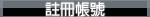
<style>
.page{position:relative;width:150px;height:17px;background:#686f75}
.page>*{position:absolute;margin:0}
.t1{font:15px "AdobeFanHeitiStd-Bold";color:#ffffff}
</style>
<div class="page">
<p class="t1" style="left:45px;top:2px;width:60px;height:15px">註冊帳號</p>
</div>
